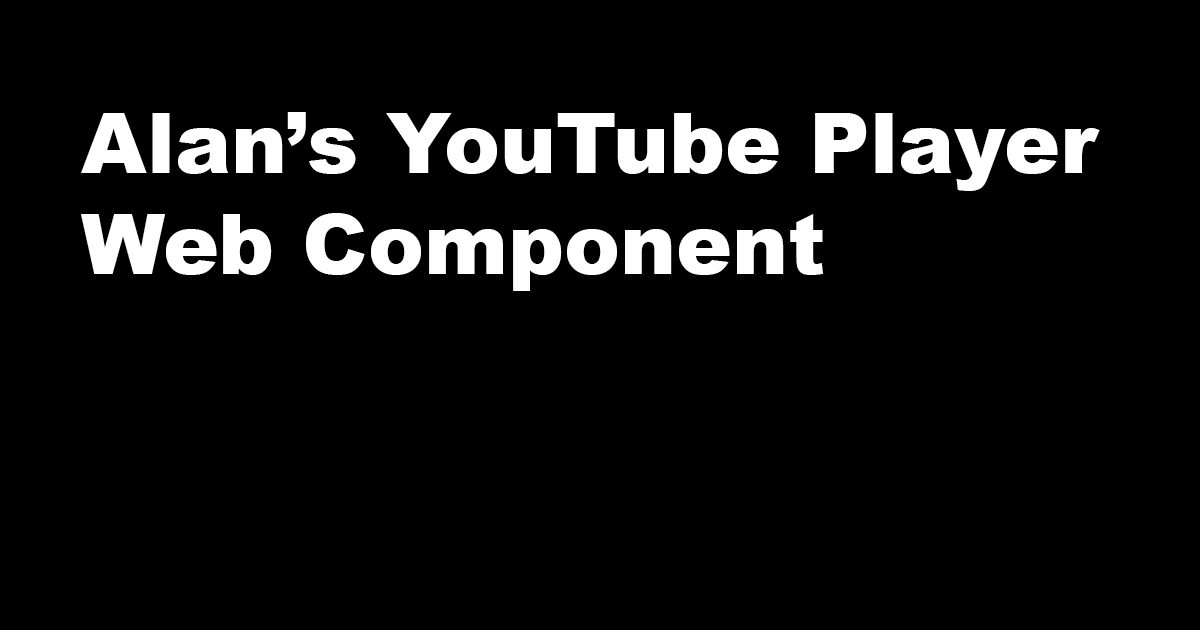
<style>
.page{position:relative;width:1200px;height:630px;background:#000000}
.page>*{position:absolute;margin:0}
.t1{font:84px "Arial-Black";color:#ffffff}
</style>
<div class="page">
<p class="t1" style="left:81px;top:112px;width:1019px;height:179px">Alan’s YouTube Player<br>Web Component</p>
</div>
